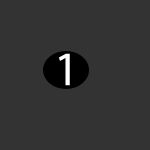
<style>
.page{position:relative;width:150px;height:150px;background:#333333}
.page>*{position:absolute;margin:0}
.t1{font:48px "MyriadPro-Regular";color:#fffefe}
</style>
<div class="page">
<p class="t1" style="left:59px;top:53px;width:11px;height:33px">1</p>
</div>
